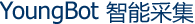
<style>
.page{position:relative;width:195px;height:24px;background:#ffffff}
.page>*{position:absolute;margin:0}
.t1{font:24px "Tahoma";letter-spacing:-0.01em;color:#003366}
.t2{font:22px "MicrosoftYaHei";color:#003366}
</style>
<div class="page">
<p class="t1" style="left:0px;top:1px;width:99px;height:23px">YoungBot</p>
<p class="t2" style="left:106px;top:1px;width:88px;height:22px">智能采集</p>
</div>
